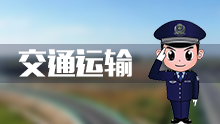
<style>
.page{position:relative;width:220px;height:124px}
.page>*{position:absolute;margin:0}
.t1{font:28.8px "MFLiHei_Noncommercial-Regular";color:#ffffff}
</style>
<div class="page">
<p class="t1" style="left:18px;top:49px;width:114px;height:28px">交通运输</p>
</div>
